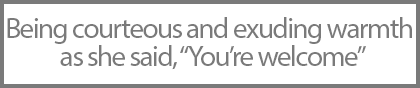
<style>
.page{position:relative;width:420px;height:88px;background:#ffffff}
.page>*{position:absolute;margin:0}
.t1{font:29px/28px "MyriadPro-Regular";letter-spacing:-0.05em;color:#7a7a7a}
</style>
<div class="page">
<p class="t1" style="left:7px;top:17px;width:405px;height:53px;text-align:center">Being courteous and exuding warmth <br>as she said, “You’re welcome”</p>
</div>
